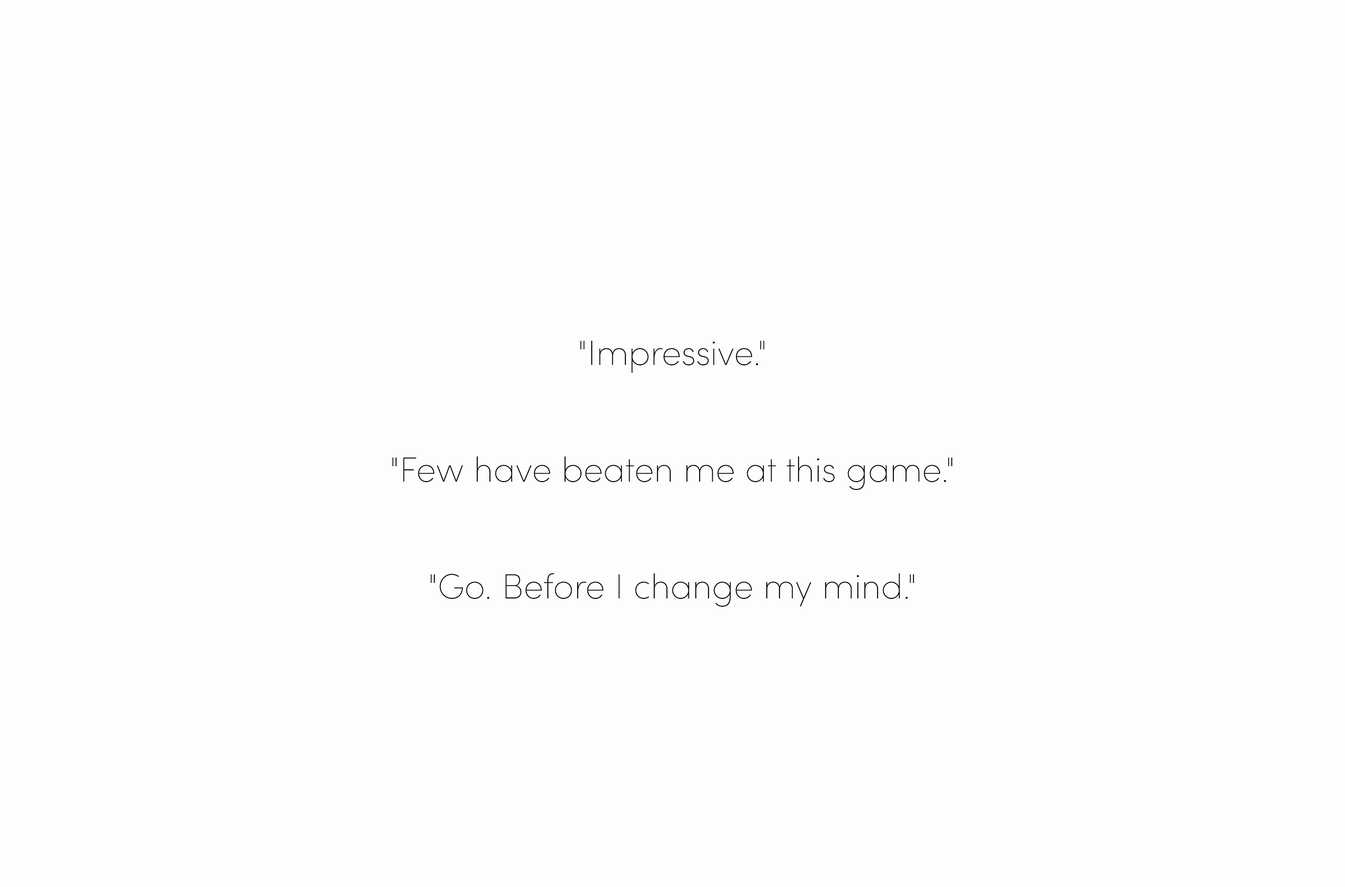
<style>
.page{position:relative;width:1345px;height:887px;background:#fffcfc}
.page>*{position:absolute;margin:0}
.t1{font:35px/58.4px "SofiaPro-UltraLight";color:#000000}
</style>
<div class="page">
<p class="t1" style="left:392px;top:340px;width:560px;height:267px;text-align:center">"Impressive."<br><br>"Few have beaten me at this game."<br><br>"Go. Before I change my mind."</p>
</div>
